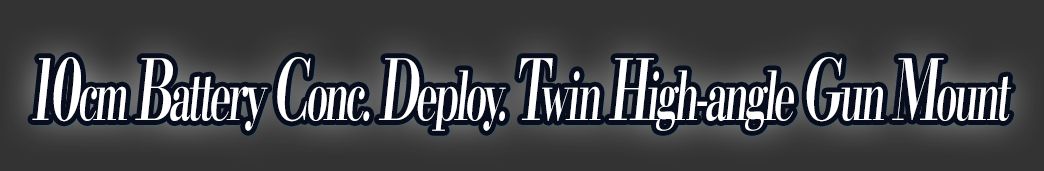
<style>
.page{position:relative;width:1044px;height:171px;background:#333333}
.page>*{position:absolute;margin:0}
.t1{font:67.2px "KochoStd-Heavy";letter-spacing:-0.08em;color:#ffffff;font-style:italic;scale:0.59 1}
.t2{font:84px "KochoStd-Heavy";letter-spacing:-0.08em;color:#ffffff;font-style:italic;scale:0.59 1}
</style>
<div class="page">
<p class="t1" style="left:32px;top:57px;width:980px;height:74px"><span class="t2">10</span>cm <span class="t2">B</span>attery <span class="t2">C</span>onc. <span class="t2">D</span>eploy. <span class="t2">T</span>win <span class="t2">H</span>igh-angle <span class="t2">G</span>un <span class="t2">M</span>ount</p>
</div>
